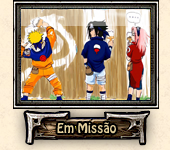
<style>
.page{position:relative;width:170px;height:150px}
.page>*{position:absolute;margin:0}
.t1{font:12px "HoboStd";color:#e3cf9c}
</style>
<div class="page">
<p class="t1" style="left:57px;top:122px;width:59px;height:12px">Em Missão</p>
</div>
